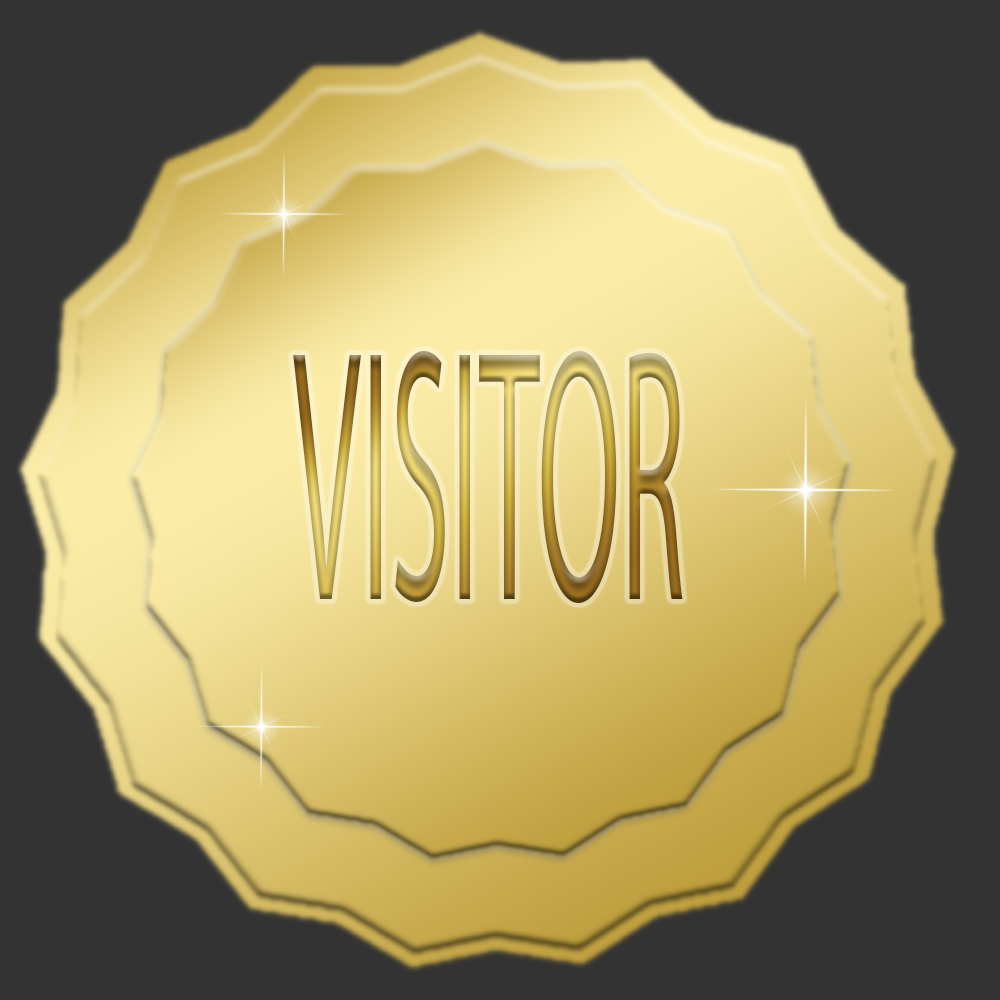
<style>
.page{position:relative;width:1000px;height:1000px;background:#333333}
.page>*{position:absolute;margin:0}
.t1{font:361.4px "MyriadPro-Regular";scale:0.34 1}
</style>
<div class="page">
<p class="t1" style="left:293px;top:350px;width:390px;height:254px">VISITOR</p>
</div>
